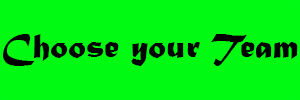
<style>
.page{position:relative;width:300px;height:100px;background:#00fa12}
.page>*{position:absolute;margin:0}
.t1{font:36px "MaturaMTScriptCapitals";color:#000000}
</style>
<div class="page">
<p class="t1" style="left:3px;top:34px;width:295px;height:32px">Choose your Team</p>
</div>
